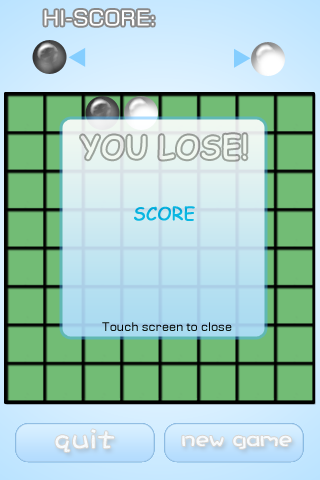
<style>
.page{position:relative;width:320px;height:480px;background:#72bc75}
.page>*{position:absolute;margin:0}
.t1{font:21px "Moire";color:#ffffff}
.t2{font:30px "ComicSansMS";color:#f1f8f1;font-weight:bold}
.t3{font:18px "ComicSansMS";color:#0bb7e2;font-weight:bold}
.t4{font:12px "Moire";color:#000000}
.t5{font:30px "DFCraftYu-W5-WING-RKSJ-H";color:#f6fafc;font-weight:bold}
.t6{font:23.8px "DFCraftYu-W5-WING-RKSJ-H";color:#f7fafc;font-weight:bold}
</style>
<div class="page">
<p class="t1" style="left:44px;top:10px;width:110px;height:16px">HI-SCORE:</p>
<p class="t2" style="left:81px;top:134px;width:166px;height:26px">YOU LOSE!</p>
<p class="t3" style="left:134px;top:206px;width:61px;height:15px">SCORE</p>
<p class="t4" style="left:102px;top:322px;width:130px;height:9px">Touch screen to close</p>
<p class="t5" style="left:55px;top:429px;width:60px;height:23px">quit</p>
<p class="t5" style="left:55px;top:429px;width:60px;height:23px">quit</p>
<p class="t6" style="left:182px;top:435px;width:110px;height:14px">new game</p>
<p class="t6" style="left:182px;top:435px;width:110px;height:14px">new game</p>
</div>
